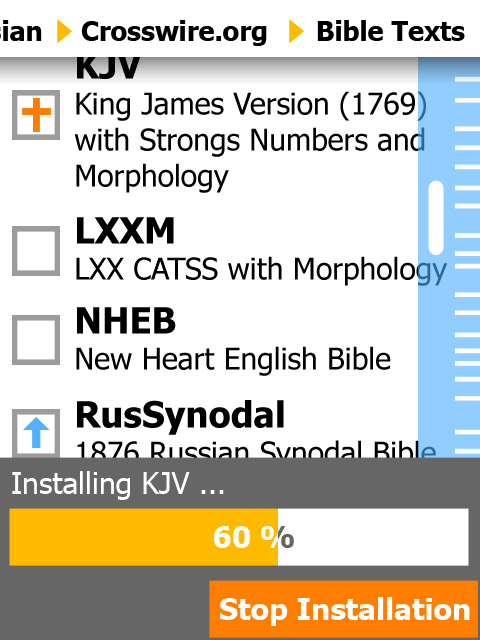
<style>
.page{position:relative;width:480px;height:640px;background:#ffffff}
.page>*{position:absolute;margin:0}
.t1{font:26.8px "Tahoma-Bold";color:#000000}
.t2{font:30px "Tahoma";color:#000000}
.t3{font:36px "Tahoma-Bold";color:#000000}
.t4{font:30px "Tahoma";color:#ffffff}
.t5{font:30px "Tahoma-Bold";color:#ffffff}
</style>
<div class="page">
<p class="t1" style="left:81px;top:20px;width:186px;height:26px">Crosswire.org</p>
<p class="t1" style="left:317px;top:20px;width:148px;height:21px">Bible Texts</p>
<p class="t2" style="left:74px;top:52px;width:352px;height:141px"><span class="t3">KJV<br></span>King James Version (1769) with Strongs Numbers and Morphology</p>
<p class="t2" style="left:76px;top:217px;width:372px;height:69px"><span class="t3">LXXM<br></span>LXX CATSS with Morphology</p>
<p class="t2" style="left:76px;top:307px;width:315px;height:69px"><span class="t3">NHEB<br></span>New Heart English Bible</p>
<p class="t2" style="left:77px;top:400px;width:359px;height:70px"><span class="t3">RusSynodal<br></span>1876 Russian Synodal Bible</p>
<p class="t4" style="left:12px;top:471px;width:212px;height:29px">Installing KJV ...</p>
<p class="t5" style="left:214px;top:526px;width:80px;height:22px">60 %</p>
<p class="t5" style="left:214px;top:526px;width:80px;height:22px">60 %</p>
<p class="t5" style="left:220px;top:597px;width:250px;height:29px">Stop Installation</p>
</div>
